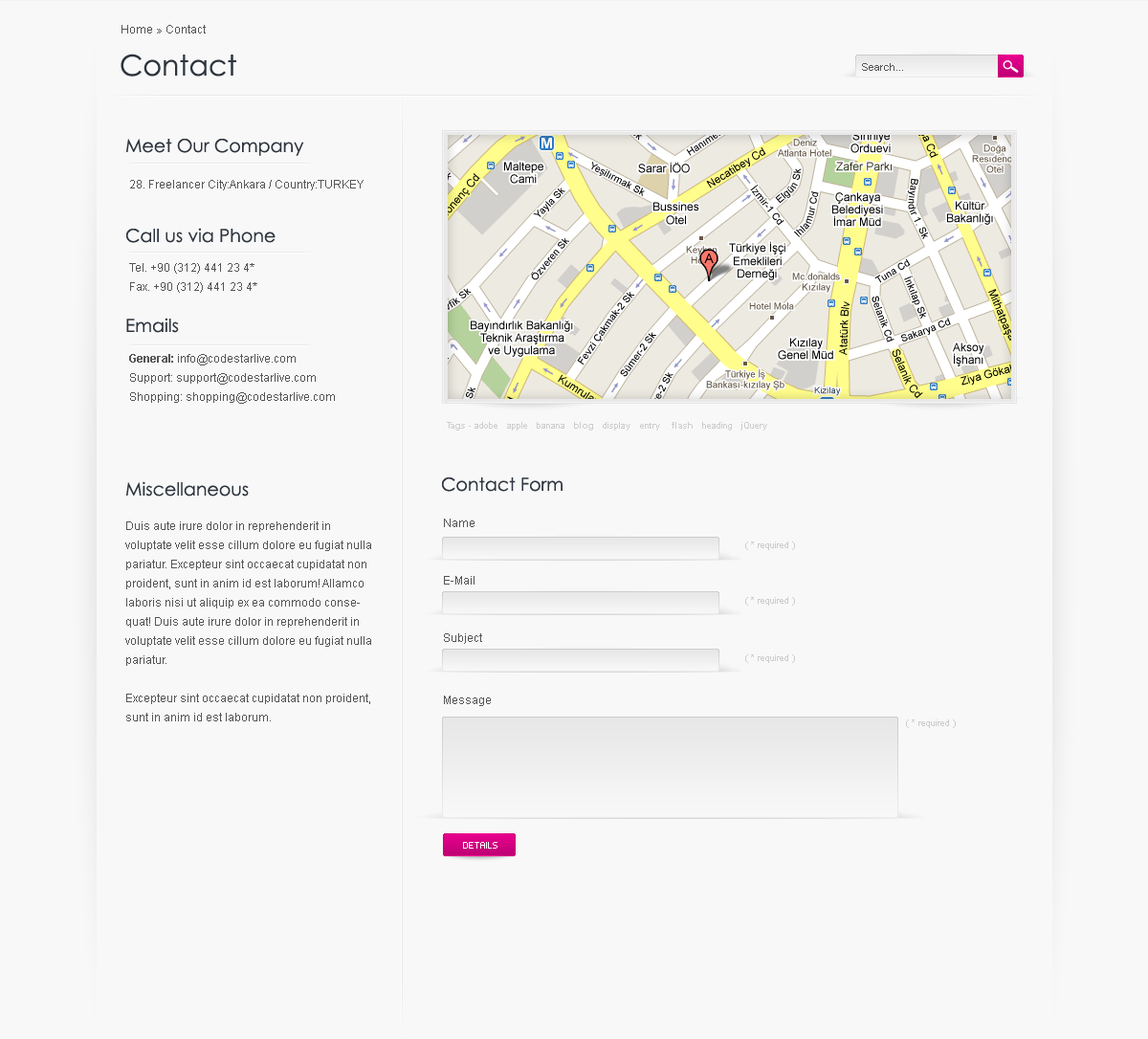
<style>
.page{position:relative;width:1148px;height:1039px;background:#f8f8f8}
.page>*{position:absolute;margin:0}
.t1{font:11.5px "ArialMT";color:#555555}
.t2{font:28.7px "CenturyGothic";color:#2e353e}
.t3{font:10.5px "ArialMT";color:#555555}
.t4{font:18.2px "CenturyGothic";color:#2e353e}
.t5{font:11.5px/19.1px "ArialMT";color:#555555}
.t6{font:11.5px/19.1px "Arial-BoldMT";color:#555555}
.t7{font:8.6px "ArialMT";color:#cdcdcd}
.t8{font:8.6px "Arial-BoldMT";color:#cdcdcd}
.t9{font:8.6px "ArialMT";color:#cccccc}
.t10{font:7.7px "PFTempestaSeven";color:#ffffff}
</style>
<div class="page">
<p class="t1" style="left:121px;top:25px;width:85px;height:8px">Home » Contact</p>
<p class="t2" style="left:121px;top:54px;width:115px;height:23px">Contact</p>
<p class="t3" style="left:862px;top:63px;width:41px;height:8px">Search...</p>
<p class="t4" style="left:126px;top:139px;width:178px;height:17px">Meet Our Company</p>
<p class="t1" style="left:130px;top:180px;width:233px;height:10px">28. Freelancer City:Ankara / Country:TURKEY</p>
<p class="t4" style="left:126px;top:228px;width:149px;height:15px">Call us via Phone</p>
<p class="t5" style="left:129px;top:263px;width:128px;height:30px">Tel. +90 (312) 441 23 4* <br>Fax. +90 (312) 441 23 4*</p>
<p class="t4" style="left:126px;top:318px;width:53px;height:15px">Emails</p>
<p class="t5" style="left:129px;top:354px;width:206px;height:50px"><span class="t6">General:</span> info@codestarlive.com<br>Support: support@codestarlive.com<br>Shopping: shopping@codestarlive.com</p>
<p class="t7" style="left:447px;top:422px;width:320px;height:8px"><span class="t8">Tags -</span> adobe   apple   banana   <span class="t8">blog   </span>display   entry    <span class="t8">flash   </span>heading   jQuery</p>
<p class="t4" style="left:126px;top:481px;width:123px;height:15px">Miscellaneous</p>
<p class="t4" style="left:442px;top:477px;width:120px;height:15px">Contact Form</p>
<p class="t5" style="left:125px;top:521px;width:246px;height:200px">Duis aute irure dolor in reprehenderit in voluptate velit esse cillum dolore eu fugiat nulla pariatur. Excepteur sint occaecat cupidatat non proident, sunt in anim id est laborum! Allamco laboris nisi ut aliquip ex ea commodo consequat! Duis aute irure dolor in reprehenderit in voluptate velit esse cillum dolore eu fugiat nulla pariatur. <br><br>Excepteur sint occaecat cupidatat non proident, sunt in anim id est laborum.</p>
<p class="t1" style="left:444px;top:518px;width:30px;height:9px">Name</p>
<p class="t9" style="left:745px;top:541px;width:50px;height:9px">( * required )</p>
<p class="t1" style="left:444px;top:576px;width:30px;height:8px">E-Mail</p>
<p class="t9" style="left:745px;top:597px;width:50px;height:9px">( * required )</p>
<p class="t1" style="left:444px;top:633px;width:38px;height:11px">Subject</p>
<p class="t9" style="left:745px;top:654px;width:50px;height:9px">( * required )</p>
<p class="t1" style="left:444px;top:695px;width:47px;height:11px">Message</p>
<p class="t9" style="left:906px;top:719px;width:50px;height:9px">( * required )</p>
<p class="t10" style="left:463px;top:842px;width:34px;height:6px">DETAILS</p>
</div>
